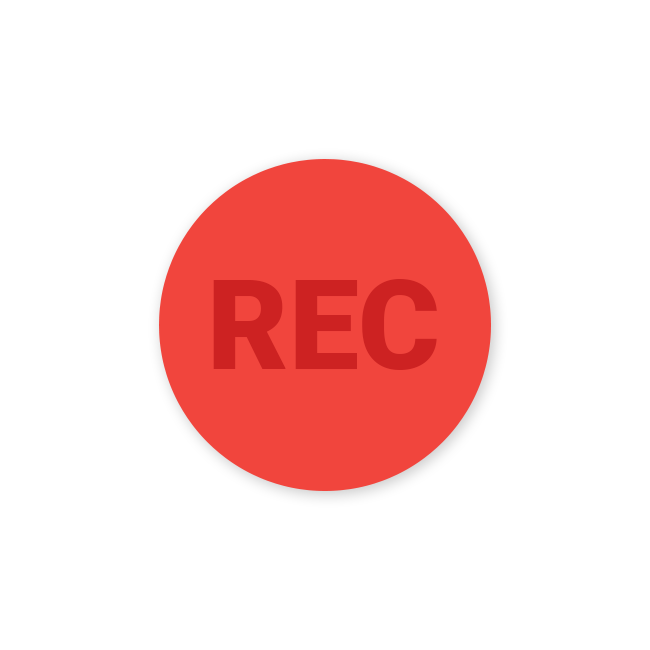
<style>
.page{position:relative;width:650px;height:650px;background:#ffffff}
.page>*{position:absolute;margin:0}
.t1{font:125px "Roboto-Black";color:#cd2222}
</style>
<div class="page">
<p class="t1" style="left:213px;top:279px;width:224px;height:91px">REC</p>
</div>
